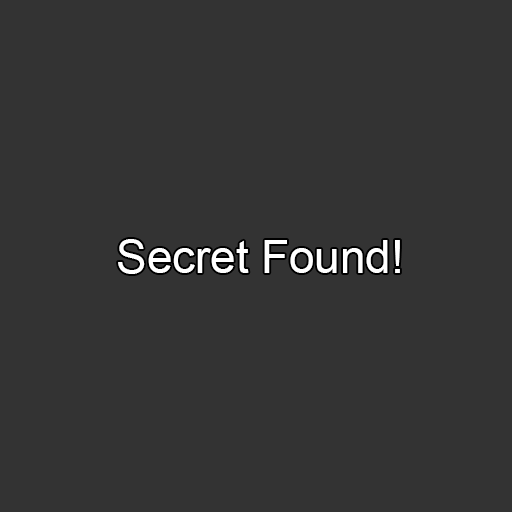
<style>
.page{position:relative;width:512px;height:512px;background:#333333}
.page>*{position:absolute;margin:0}
.t1{font:45.8px "ArialMT";color:#ffffff}
</style>
<div class="page">
<p class="t1" style="left:118px;top:239px;width:282px;height:35px">Secret Found!</p>
</div>
